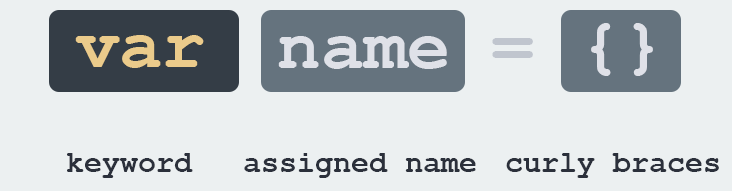
<style>
.page{position:relative;width:732px;height:191px;background:#ecf0f1}
.page>*{position:absolute;margin:0}
.t1{font:72px "CourierNewPS-BoldMT";color:#dfe1e8}
.t2{font:72px "CourierNewPS-BoldMT";color:#ebcb8b}
.t3{font:72px "CourierNewPS-BoldMT";color:#c0c5ce}
.t4{font:30px "CourierNewPS-BoldMT";color:#2b303b}
</style>
<div class="page">
<p class="t1" style="left:591px;top:23px;width:62px;height:53px">{}</p>
<p class="t2" style="left:75px;top:35px;width:129px;height:33px">var</p>
<p class="t1" style="left:278px;top:36px;width:169px;height:33px">name</p>
<p class="t3" style="left:492px;top:38px;width:41px;height:20px">=</p>
<p class="t4" style="left:67px;top:153px;width:126px;height:25px">keyword</p>
<p class="t4" style="left:244px;top:153px;width:232px;height:25px">assigned name</p>
<p class="t4" style="left:506px;top:153px;width:213px;height:25px">curly braces</p>
</div>
